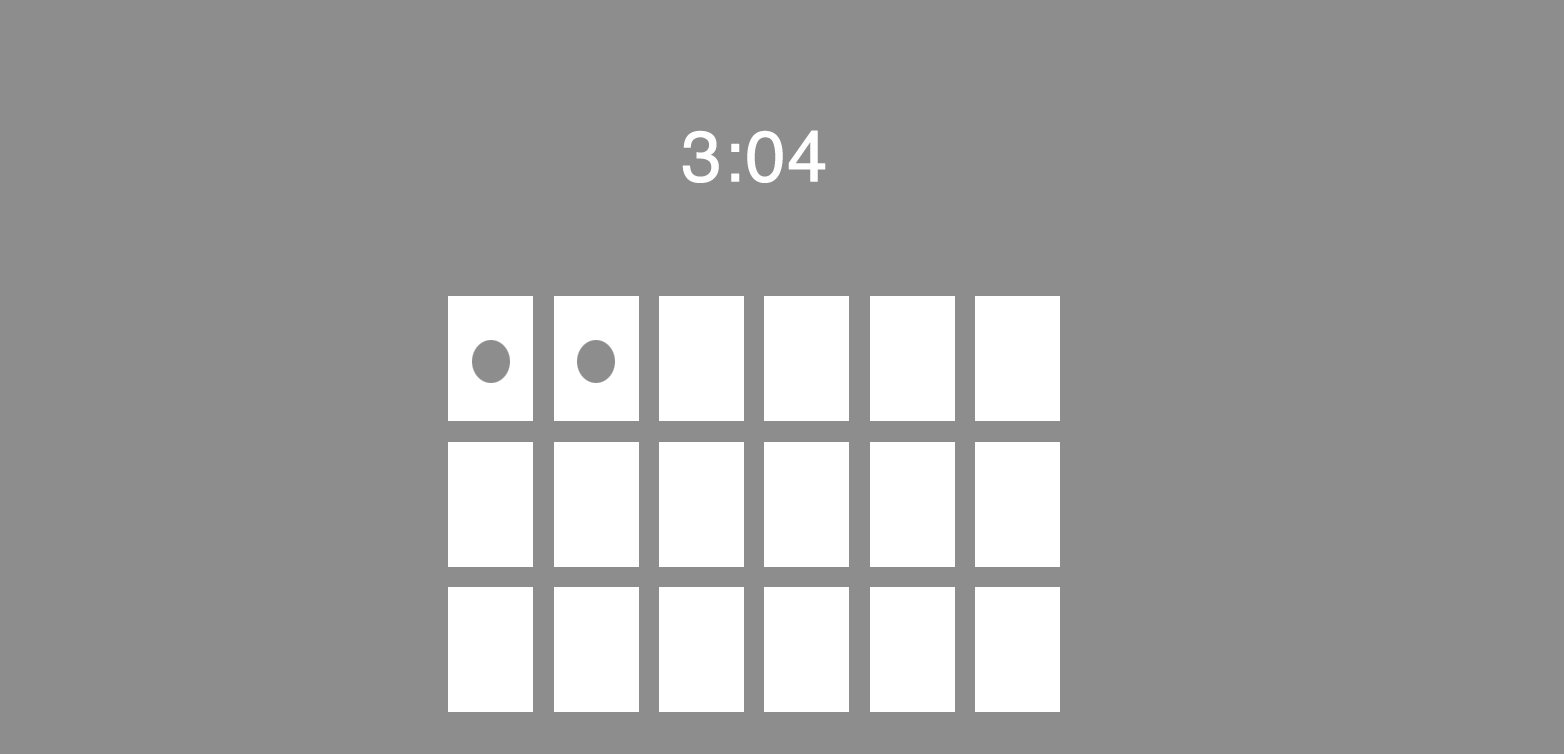
<style>
.page{position:relative;width:1564px;height:754px;background:#8d8d8d}
.page>*{position:absolute;margin:0}
.t1{font:72px "Helvetica";color:#ffffff;font-weight:bold}
</style>
<div class="page">
<p class="t1" style="left:682px;top:130px;width:144px;height:53px">3:04</p>
</div>
